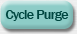
<style>
.page{position:relative;width:77px;height:34px;background:#8dccc7}
.page>*{position:absolute;margin:0}
.t1{font:14px "FranklinGothic-Medium";letter-spacing:-0.05em;color:#004640}
</style>
<div class="page">
<p class="t1" style="left:5px;top:10px;width:64px;height:11px">Cycle Purge</p>
</div>
